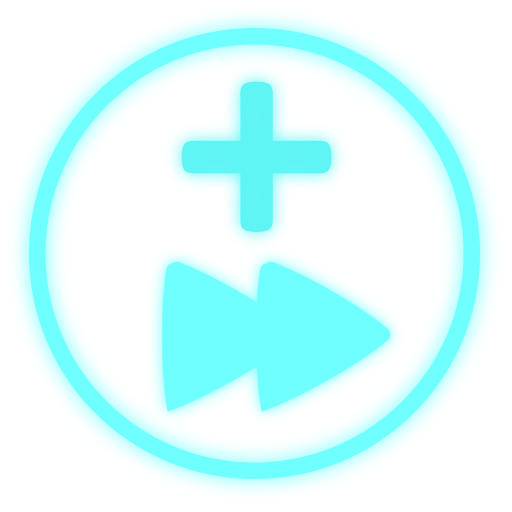
<style>
.page{position:relative;width:512px;height:512px;background:#ffffff}
.page>*{position:absolute;margin:0}
.t1{font:281.6px "Neuropol-Regular";color:#60f5f5}
</style>
<div class="page">
<p class="t1" style="left:181px;top:81px;width:151px;height:151px">+</p>
</div>
